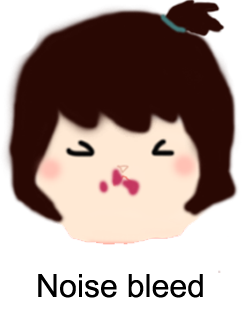
<style>
.page{position:relative;width:242px;height:311px;background:#ffffff}
.page>*{position:absolute;margin:0}
.t1{font:32px "ArialMT";color:#000000}
</style>
<div class="page">
<p class="t1" style="left:38px;top:274px;width:165px;height:24px">Noise bleed</p>
</div>
